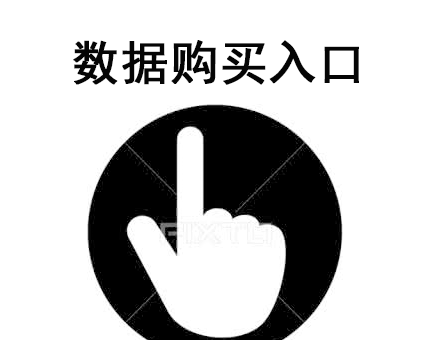
<style>
.page{position:relative;width:426px;height:340px;background:#ffffff}
.page>*{position:absolute;margin:0}
.t1{font:48px "SimHei";color:#050505;font-weight:bold}
</style>
<div class="page">
<p class="t1" style="left:73px;top:40px;width:286px;height:45px">数据购买入口</p>
</div>
